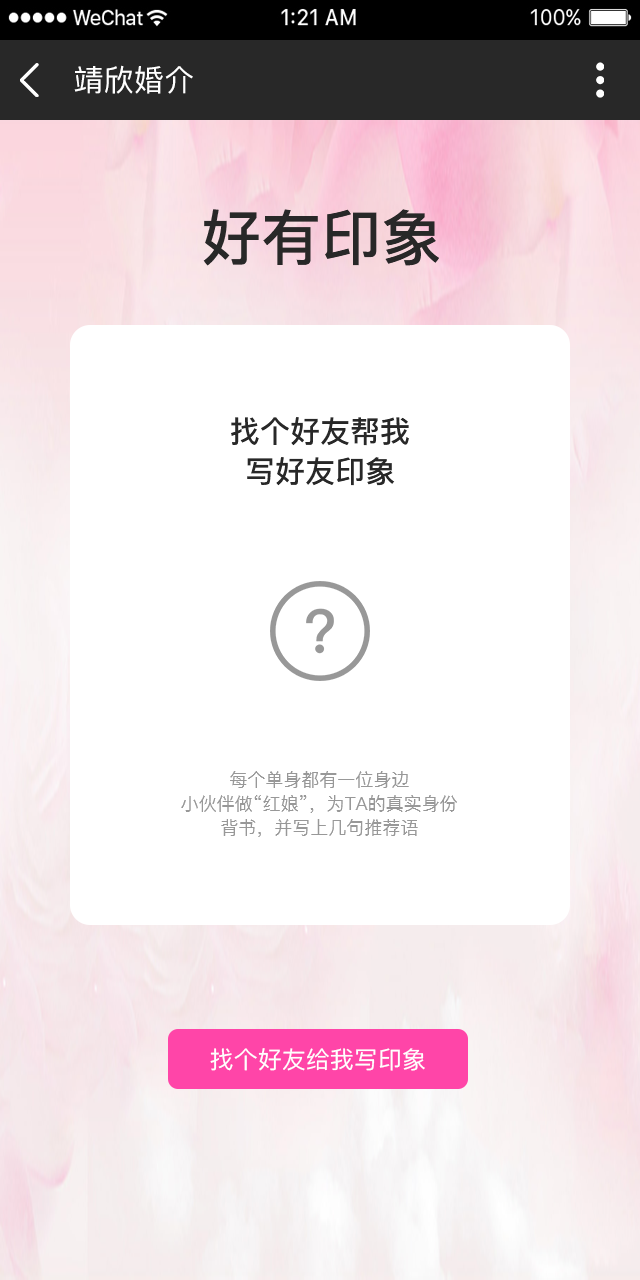
<style>
.page{position:relative;width:640px;height:1280px;background:#ffffff}
.page>*{position:absolute;margin:0}
.t1{font:30px "PingFang-SC-Medium";letter-spacing:0.01em;color:#ffffff;text-transform:uppercase}
.t2{font:60px "PingFang-SC-Bold";color:#282828;text-transform:uppercase}
.t3{font:30px/40px "PingFang-SC-Bold";color:#282828;text-transform:uppercase}
.t4{font:18px/24px "PingFang-SC-Medium";color:#989898;text-transform:uppercase}
.t5{font:23.9px "PingFang-SC-Medium";color:#ffffff;text-transform:uppercase}
</style>
<div class="page">
<p class="t1" style="left:74px;top:65px;width:119px;height:29px">靖欣婚介</p>
<p class="t2" style="left:203px;top:209px;width:236px;height:57px">好有印象</p>
<p class="t3" style="left:231px;top:417px;width:178px;height:69px;text-align:center">找个好友帮我<br>写好友印象</p>
<p class="t4" style="left:181px;top:771px;width:276px;height:66px;text-align:center">每个单身都有一位身边<br>小伙伴做“红娘”，为ta的真实身份<br>背书，并写上几句推荐语</p>
<p class="t5" style="left:210px;top:1048px;width:215px;height:23px">找个好友给我写印象</p>
</div>
